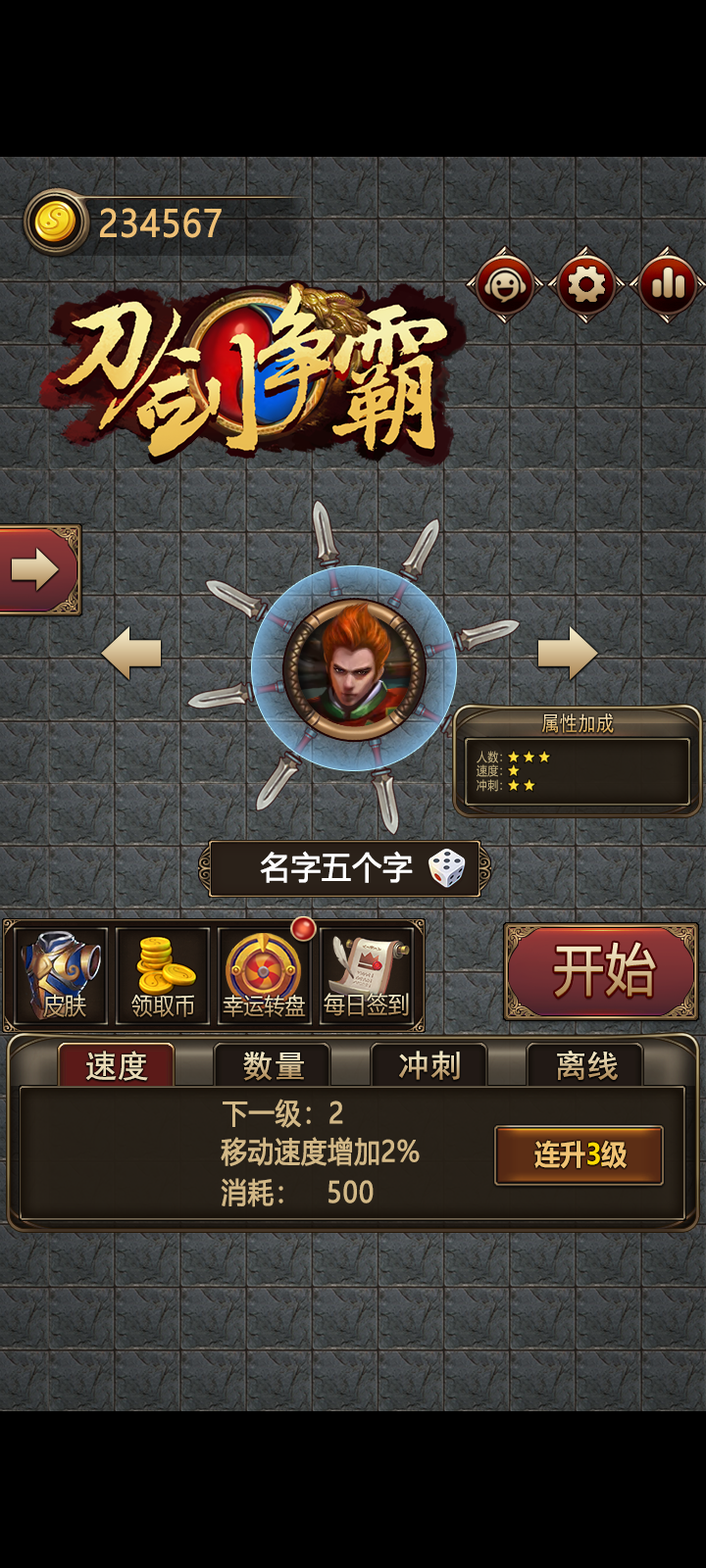
<style>
.page{position:relative;width:706px;height:1568px}
.page>*{position:absolute;margin:0}
.t1{font:36.6px "MicrosoftYaHei";letter-spacing:0.012em;color:#efc075;font-weight:bold;scale:0.91 1}
.t2{font:20.9px "SimHei";letter-spacing:0.012em;scale:0.86 1}
.t3{font:12.3px "MicrosoftYaHei";letter-spacing:0.012em;color:#c9b685;scale:0.88 1}
.t4{font:31.7px "MicrosoftYaHei";letter-spacing:0.012em;color:#ffffff;font-weight:bold;scale:0.93 1}
.t5{font:54.9px "MicrosoftYaHei";letter-spacing:0.012em;font-weight:bold;scale:0.91 1}
.t6{font:31.4px "SimHei";color:#e9dab6;font-weight:bold}
.t7{font:31.4px "SimHei";font-weight:bold}
.t8{font:28.4px "MicrosoftYaHei";letter-spacing:0.012em;color:#d2b887;font-weight:bold;scale:0.9 1}
.t9{font:28.8px "MicrosoftYaHei-Bold";letter-spacing:-0.025em;color:#f0c274;scale:0.91 1}
</style>
<div class="page">
<p class="t1" style="left:100px;top:208px;width:121px;height:30px">234567</p>
<p class="t2" style="left:541px;top:713px;width:72px;height:20px">属性加成</p>
<p class="t3" style="left:476px;top:751px;width:26px;height:12px">人数：</p>
<p class="t3" style="left:476px;top:764px;width:26px;height:13px">速度：</p>
<p class="t3" style="left:476px;top:779px;width:26px;height:13px">冲刺：</p>
<p class="t4" style="left:260px;top:851px;width:153px;height:32px">名字五个字</p>
<p class="t5" style="left:554px;top:942px;width:102px;height:55px">开始</p>
<p class="t5" style="left:554px;top:943px;width:102px;height:55px">开始</p>
<p class="t6" style="left:85px;top:1051px;width:63px;height:30px">速度</p>
<p class="t7" style="left:243px;top:1052px;width:61px;height:29px">数量</p>
<p class="t7" style="left:399px;top:1051px;width:61px;height:29px">冲刺</p>
<p class="t7" style="left:557px;top:1051px;width:60px;height:29px">离线</p>
<p class="t8" style="left:222px;top:1099px;width:121px;height:29px">下一级：2</p>
<p class="t8" style="left:220px;top:1137px;width:199px;height:29px">移动速度增加2%</p>
<p class="t9" style="left:534px;top:1140px;width:92px;height:29px">连升3级</p>
<p class="t8" style="left:220px;top:1178px;width:153px;height:29px">消耗：   500</p>
</div>
